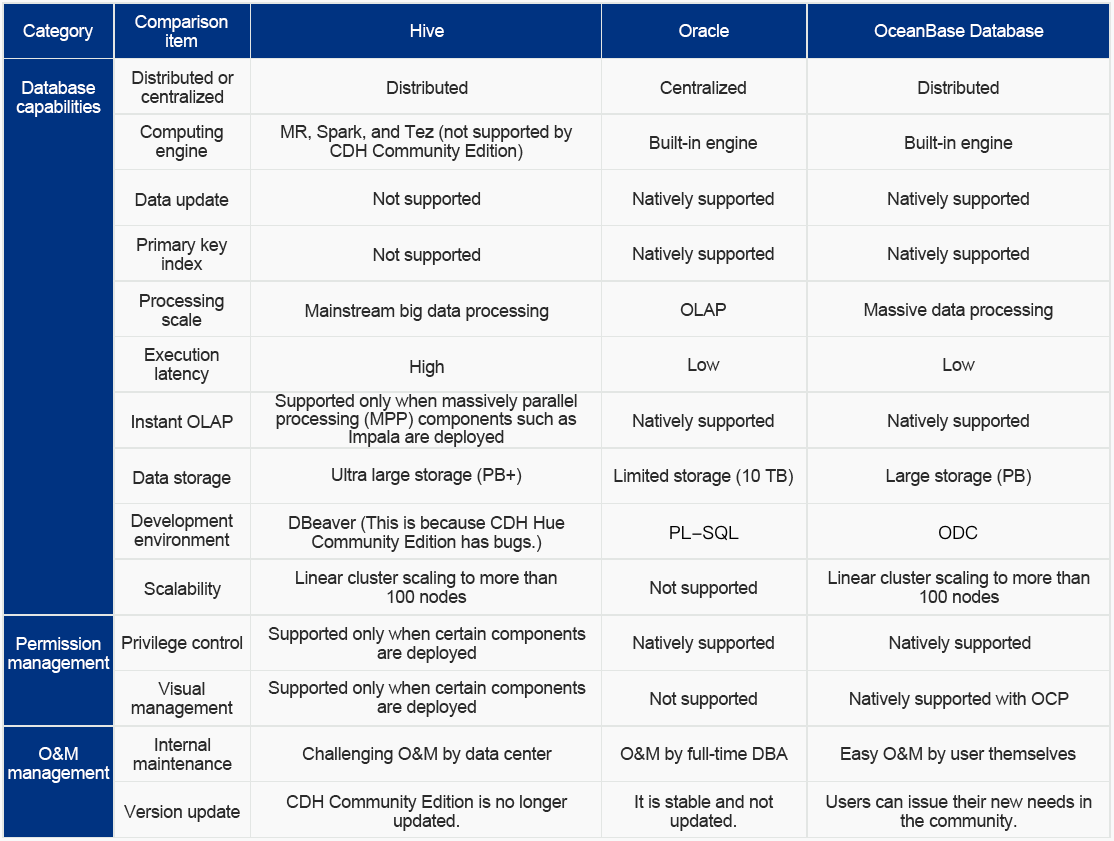
<style>
.page{position:relative;width:1114px;height:841px;background:#f9f9f9}
.page>*{position:absolute;margin:0}
.t1{font:18px/19px "ArialMT";letter-spacing:-0.02em;color:#ffffff}
.t2{font:18px "ArialMT";letter-spacing:-0.02em;color:#ffffff}
.t3{font:18px/19px "ArialMT";letter-spacing:-0.02em;color:#2a2a2a}
.t4{font:18px "ArialMT";letter-spacing:-0.02em;color:#2a2a2a}
.t5{font:18px/55.5px "ArialMT";letter-spacing:-0.02em;color:#2a2a2a}
.t6{font:18px/56px "ArialMT";letter-spacing:-0.02em;color:#2a2a2a}
.t7{font:18px/18px "ArialMT";letter-spacing:-0.02em;color:#2a2a2a}
</style>
<div class="page">
<p class="t1" style="left:135px;top:15px;width:93px;height:32px;text-align:center">Comparison item</p>
<p class="t2" style="left:23px;top:24px;width:70px;height:17px">Category</p>
<p class="t2" style="left:410px;top:24px;width:34px;height:13px">Hive</p>
<p class="t2" style="left:679px;top:24px;width:50px;height:13px">Oracle</p>
<p class="t2" style="left:874px;top:24px;width:170px;height:13px">OceanBase Database</p>
<p class="t3" style="left:132px;top:71px;width:102px;height:32px;text-align:center">Distributed or centralized</p>
<p class="t1" style="left:16px;top:81px;width:85px;height:36px;text-align:center">Database capabilities</p>
<p class="t4" style="left:387px;top:81px;width:81px;height:13px">Distributed</p>
<p class="t5" style="left:614px;top:81px;width:179px;height:405px;text-align:center">Centralized<br>Built-in engine<br>Natively supported<br>Natively supported<br>OLAP<br>Low<br>Natively supported<br>Limited storage (10 TB)</p>
<p class="t5" style="left:864px;top:81px;width:189px;height:405px;text-align:center">Distributed<br>Built-in engine<br>Natively supported<br>Natively supported<br>Massive data processing<br>Low<br>Natively supported<br>Large storage (PB)</p>
<p class="t3" style="left:140px;top:125px;width:83px;height:36px;text-align:center">Computing engine</p>
<p class="t3" style="left:281px;top:125px;width:292px;height:36px;text-align:center">MR, Spark, and Tez (not supported by CDH Community Edition)</p>
<p class="t4" style="left:135px;top:193px;width:94px;height:17px">Data update</p>
<p class="t6" style="left:305px;top:192px;width:244px;height:185px;text-align:center">Not supported<br>Not supported<br>Mainstream big data processing<br>High</p>
<p class="t3" style="left:137px;top:238px;width:91px;height:32px;text-align:center">Primary key index</p>
<p class="t3" style="left:140px;top:294px;width:84px;height:32px;text-align:center">Processing scale</p>
<p class="t3" style="left:145px;top:348px;width:74px;height:36px;text-align:center">Execution latency</p>
<p class="t7" style="left:275px;top:394px;width:302px;height:53px;text-align:center">Supported only when massively parallel processing (MPP) components such as Impala are deployed</p>
<p class="t4" style="left:132px;top:415px;width:101px;height:13px">Instant OLAP</p>
<p class="t4" style="left:133px;top:471px;width:98px;height:17px">Data storage</p>
<p class="t4" style="left:332px;top:468px;width:190px;height:17px">Ultra large storage (PB+)</p>
<p class="t3" style="left:131px;top:514px;width:102px;height:32px;text-align:center">Development environment</p>
<p class="t3" style="left:289px;top:516px;width:276px;height:36px;text-align:center">DBeaver (This is because CDH Hue Community Edition has bugs.)</p>
<p class="t4" style="left:144px;top:582px;width:77px;height:17px">Scalability</p>
<p class="t3" style="left:296px;top:571px;width:261px;height:32px;text-align:center">Linear cluster scaling to more than 100 nodes</p>
<p class="t5" style="left:633px;top:581px;width:141px;height:128px;text-align:center">Not supported<br>Natively supported<br>Not supported</p>
<p class="t3" style="left:828px;top:571px;width:262px;height:32px;text-align:center">Linear cluster scaling to more than 100 nodes</p>
<p class="t3" style="left:268px;top:627px;width:318px;height:36px;text-align:center">Supported only when certain components are deployed</p>
<p class="t1" style="left:8px;top:637px;width:102px;height:36px;text-align:center">Permission management</p>
<p class="t4" style="left:122px;top:636px;width:121px;height:17px">Privilege control</p>
<p class="t4" style="left:889px;top:636px;width:142px;height:17px">Natively supported</p>
<p class="t3" style="left:131px;top:682px;width:102px;height:36px;text-align:center">Visual management</p>
<p class="t3" style="left:268px;top:681px;width:318px;height:36px;text-align:center">Supported only when certain components are deployed</p>
<p class="t4" style="left:850px;top:692px;width:219px;height:17px">Natively supported with OCP</p>
<p class="t1" style="left:8px;top:747px;width:102px;height:36px;text-align:center">O&amp;M management</p>
<p class="t3" style="left:133px;top:738px;width:99px;height:32px;text-align:center">Internal maintenance</p>
<p class="t4" style="left:302px;top:747px;width:250px;height:17px">Challenging O&amp;M by data center</p>
<p class="t4" style="left:620px;top:747px;width:168px;height:17px">O&amp;M by full-time DBA</p>
<p class="t4" style="left:841px;top:747px;width:235px;height:17px">Easy O&amp;M by user themselves</p>
<p class="t3" style="left:286px;top:795px;width:282px;height:36px;text-align:center">CDH Community Edition is no longer updated.</p>
<p class="t3" style="left:635px;top:795px;width:139px;height:36px;text-align:center">It is stable and not updated.</p>
<p class="t3" style="left:826px;top:795px;width:266px;height:36px;text-align:center">Users can issue their new needs in the community.</p>
<p class="t4" style="left:124px;top:805px;width:116px;height:17px">Version update</p>
</div>
